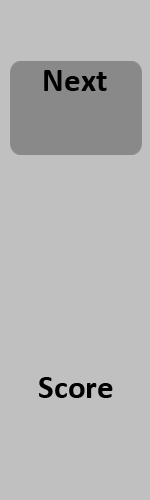
<style>
.page{position:relative;width:150px;height:500px;background:#c0c0c0}
.page>*{position:absolute;margin:0}
.t1{font:33.3px "Calibri-Bold";color:#000000}
</style>
<div class="page">
<p class="t1" style="left:44px;top:70px;width:63px;height:21px">Next</p>
<p class="t1" style="left:39px;top:377px;width:74px;height:21px">Score</p>
</div>
